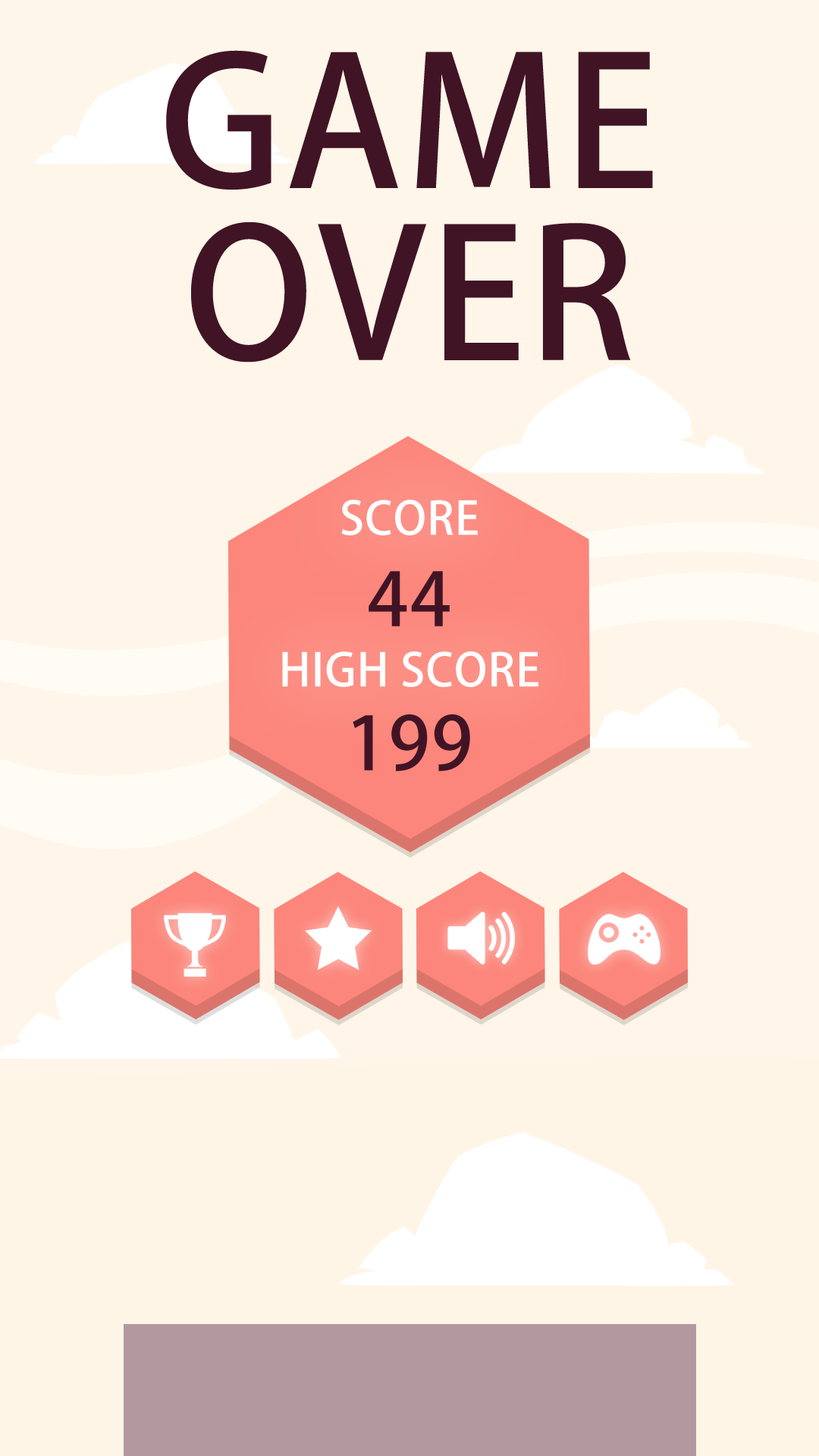
<style>
.page{position:relative;width:819px;height:1456px}
.page>*{position:absolute;margin:0}
.t1{font:177.5px/172px "AdobeFanHeitiStd-Bold";letter-spacing:0.02em;color:#411425}
.t2{font:45px "AdobeFanHeitiStd-Bold";letter-spacing:0.02em;color:#ffffff}
.t3{font:73px "AdobeFanHeitiStd-Bold";letter-spacing:0.02em;color:#411425}
</style>
<div class="page">
<p class="t1" style="left:166px;top:50px;width:487px;height:312px;text-align:center">GAME<br>OVER</p>
<p class="t2" style="left:341px;top:500px;width:137px;height:35px">SCORE</p>
<p class="t3" style="left:369px;top:571px;width:81px;height:55px">44</p>
<p class="t2" style="left:282px;top:651px;width:256px;height:36px">HIGH SCORE</p>
<p class="t3" style="left:353px;top:714px;width:117px;height:57px">199</p>
</div>
